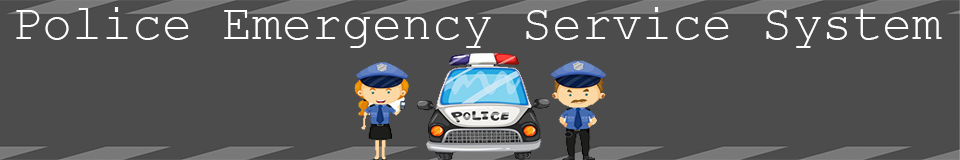
<style>
.page{position:relative;width:960px;height:160px;background:#4c4c4c}
.page>*{position:absolute;margin:0}
.t1{font:50px "CourierNewPSMT";color:#ffffff}
</style>
<div class="page">
<p class="t1" style="left:16px;top:7px;width:926px;height:41px">Police Emergency Service System</p>
</div>
